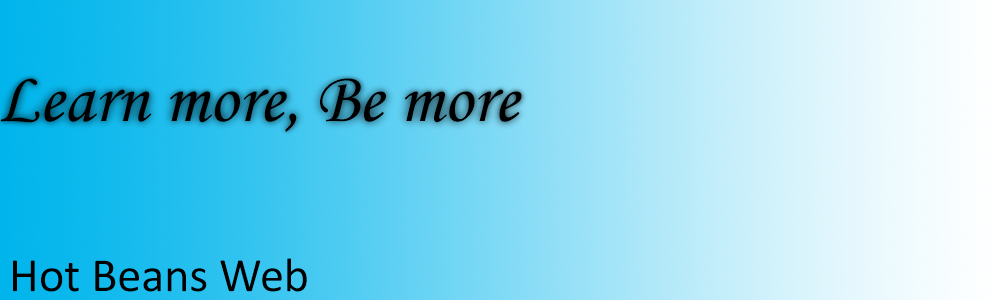
<style>
.page{position:relative;width:1000px;height:300px}
.page>*{position:absolute;margin:0}
.t1{font:72px "MonotypeCorsiva";color:#000000}
.t2{font:48px "Calibri";color:#000000}
</style>
<div class="page">
<p class="t1" style="left:0px;top:78px;width:522px;height:54px">Learn more, Be more</p>
<p class="t2" style="left:13px;top:258px;width:294px;height:34px">Hot Beans Web</p>
</div>
